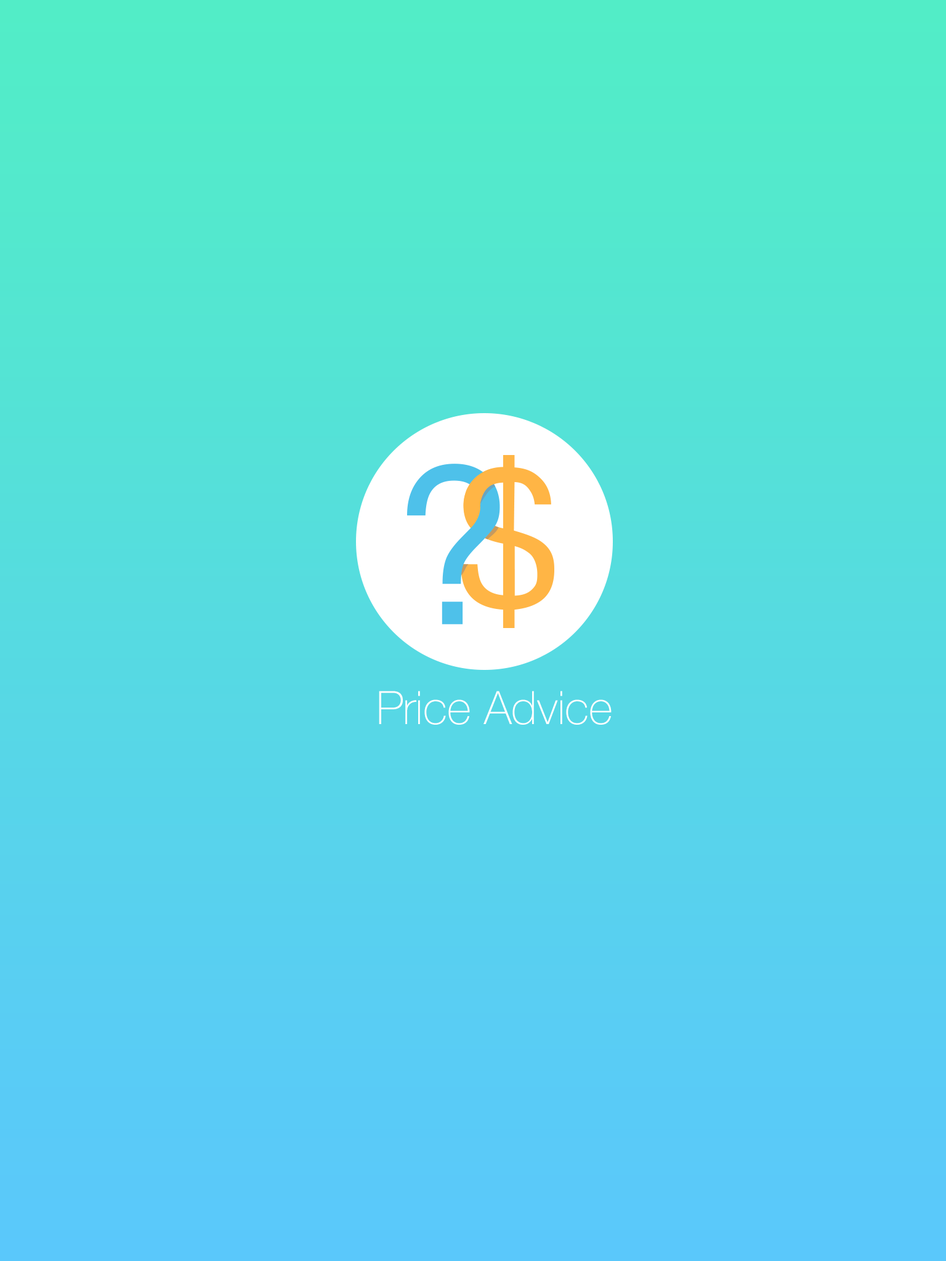
<style>
.page{position:relative;width:946px;height:1261px}
.page>*{position:absolute;margin:0}
.t1{font:46.1px "HelveticaNeue-Thin";color:#ffffff}
</style>
<div class="page">
<p class="t1" style="left:379px;top:691px;width:232px;height:34px">Price Advice</p>
</div>
